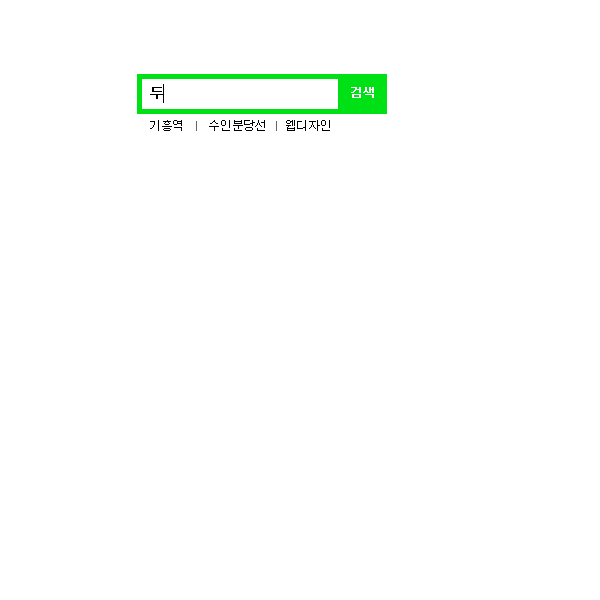
<style>
.page{position:relative;width:600px;height:600px;background:#ffffff}
.page>*{position:absolute;margin:0}
.t1{font:12px "Dotum";letter-spacing:-0.025em;color:#ffffff;font-weight:bold}
.t2{font:11.9px "Dotum";letter-spacing:-0.025em;color:#000000}
</style>
<div class="page">
<p class="t1" style="left:351px;top:87px;width:23px;height:11px">검색</p>
<p class="t2" style="left:150px;top:120px;width:32px;height:11px">기흥역</p>
<p class="t2" style="left:209px;top:120px;width:56px;height:11px">수인분당선</p>
<p class="t2" style="left:286px;top:120px;width:44px;height:11px">웹디자인</p>
</div>
